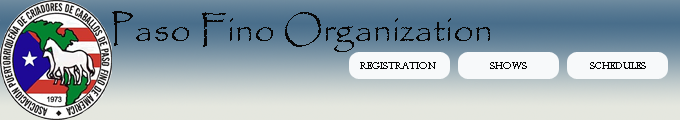
<style>
.page{position:relative;width:680px;height:120px}
.page>*{position:absolute;margin:0}
.t1{font:36px "Papyrus-Regular";color:#070707}
.t2{font:10px "PerpetuaTitlingMT-Light";color:#070707}
</style>
<div class="page">
<p class="t1" style="left:112px;top:11px;width:378px;height:41px">Paso Fino Organization</p>
<p class="t2" style="left:360px;top:62px;width:76px;height:7px">Registration</p>
<p class="t2" style="left:490px;top:62px;width:37px;height:7px">Shows</p>
<p class="t2" style="left:590px;top:62px;width:56px;height:7px">schedules</p>
</div>
